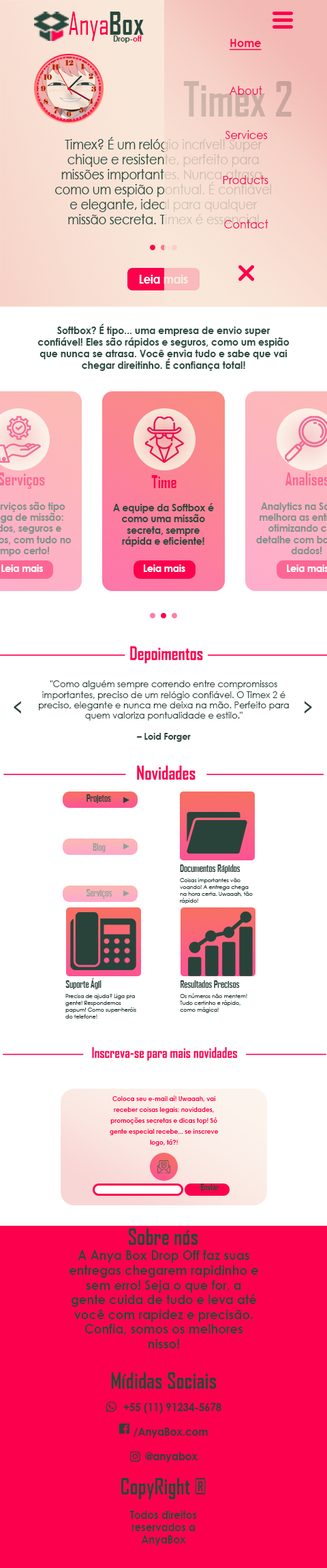
<style>
.page{position:relative;width:327px;height:1568px;background:#ffffff}
.page>*{position:absolute;margin:0}
.t1{font:29.8px "AgencyFB-Reg";color:#fc004d;scale:0.93 1}
.t2{font:29.8px "AgencyFB-Bold";color:#28483d;scale:0.93 1}
.t3{font:7.8px "CenturyGothic-Bold";color:#28483d;scale:0.93 1}
.t4{font:7.8px "CenturyGothic-Bold";color:#fc004d;scale:0.93 1}
.t5{font:11.8px "CenturyGothic-Bold";color:#fc004d;text-decoration:underline;scale:0.93 1}
.t6{font:46.6px "AgencyFB-Bold";color:#ccb1a7;scale:0.89 1}
.t7{font:11.8px "CenturyGothic";color:#fc004d;scale:0.93 1}
.t8{font:13.4px "CenturyGothic";scale:0.89 1}
.t9{font:12.2px "CenturyGothic-Bold";scale:0.89 1}
.t10{font:10.2px "CenturyGothic-Bold";color:#29493d;scale:0.93 1}
.t11{font:17.1px "AgencyFB-Bold";color:#fc004d;scale:0.93 1}
.t12{font:10px "CenturyGothic-Bold";color:#28483d;scale:0.93 1}
.t13{font:10px "CenturyGothic-Bold";color:#ffffff;scale:0.93 1}
.t14{font:9.4px "CenturyGothic";color:#2a433a;scale:0.93 1}
.t15{font:9.4px "CenturyGothic-Bold";color:#2a433a;scale:0.93 1}
.t16{font:9.2px "AgencyFB-Bold";color:#2a433a;scale:0.93 1}
.t17{font:9.2px "AgencyFB-Bold";color:#94a19c;scale:0.93 1}
.t18{font:5.8px/6.8px "CenturyGothic";color:#2a433a;scale:0.93 1}
.t19{font:6.6px/10.9px "CenturyGothic-Bold";color:#fc004d;scale:0.93 1}
.t20{font:9.1px "AgencyFB-Bold";color:#2a433a;scale:0.95 1}
.t21{font:22.1px "AgencyFB-Bold";color:#2a433a;scale:0.93 1}
.t22{font:13.3px "CenturyGothic-Bold";color:#2a433a;scale:0.93 1}
.t23{font:11px "CenturyGothic-Bold";color:#2a433a;scale:0.93 1}
</style>
<div class="page">
<p class="t1" style="left:69px;top:12px;width:75px;height:29px">Anya<span class="t2">Box</span></p>
<p class="t3" style="left:113px;top:35px;width:29px;height:8px">Drop-<span class="t4">off</span></p>
<p class="t5" style="left:230px;top:39px;width:32px;height:11px">Home</p>
<p class="t6" style="left:183px;top:81px;width:109px;height:36px">Timex 2</p>
<p class="t7" style="left:229px;top:86px;width:33px;height:9px">About</p>
<p class="t8" style="left:55px;top:137px;width:216px;height:87px;text-align:center">Timex? É um relógio incrível! Super chique e resistente, perfeito para missões importantes. Nunca atrasa, como um espião pontual. É confiável e elegante, ideal para qualquer missão secreta. Timex é essencial</p>
<p class="t7" style="left:225px;top:130px;width:43px;height:9px">Services</p>
<p class="t7" style="left:223px;top:175px;width:46px;height:9px">Products</p>
<p class="t7" style="left:224px;top:220px;width:45px;height:8px">Contact</p>
<p class="t9" style="left:139px;top:275px;width:49px;height:9px">Leia mais</p>
<p class="t10" style="left:37px;top:324px;width:253px;height:47px;text-align:center">Softbox? É tipo... uma empresa de envio super confiável! Eles são rápidos e seguros, como um espião que nunca se atrasa. Você envia tudo e sabe que vai chegar direitinho. É confiança total!</p>
<p class="t11" style="left:151px;top:475px;width:26px;height:13px">Time</p>
<p class="t12" style="left:113px;top:503px;width:101px;height:44px;text-align:center">A equipe da Softbox é como uma missão secreta, sempre rápida e eficiente!</p>
<p class="t13" style="left:1px;top:564px;width:42px;height:8px">Leia mais</p>
<p class="t13" style="left:144px;top:564px;width:41px;height:8px">Leia mais</p>
<p class="t13" style="left:287px;top:564px;width:42px;height:8px">Leia mais</p>
<p class="t14" style="left:39px;top:680px;width:250px;height:62px;text-align:center">"Como alguém sempre correndo entre compromissos importantes, preciso de um relógio confiável. O Timex 2 é preciso, elegante e nunca me deixa na mão. Perfeito para quem valoriza pontualidade e estilo."  <br><br><span class="t15">– Loid Forger</span></p>
<p class="t16" style="left:87px;top:794px;width:24px;height:9px">Projetos</p>
<p class="t17" style="left:93px;top:843px;width:13px;height:9px">Blog</p>
<p class="t16" style="left:180px;top:864px;width:61px;height:9px">Documentos Rápidos</p>
<p class="t18" style="left:180px;top:878px;width:73px;height:26px">Coisas importantes vão voando! A entrega chega na hora certa. Uwaaah, tão rápido!</p>
<p class="t17" style="left:86px;top:889px;width:26px;height:10px">Serviços</p>
<p class="t16" style="left:65px;top:978px;width:37px;height:11px">Suporte Ágil</p>
<p class="t16" style="left:181px;top:980px;width:59px;height:8px">Resultados Precisos</p>
<p class="t18" style="left:65px;top:994px;width:71px;height:25px">Precisa de ajuda? Liga pra gente! Respondemos papum! Como super-heróis do telefone!</p>
<p class="t18" style="left:180px;top:993px;width:67px;height:20px">Os números não mentem! Tudo certinho e rápido, como mágica!</p>
<p class="t19" style="left:110px;top:1096px;width:109px;height:50px;text-align:center">Coloca seu e-mail aí! Uwaaah, vai receber coisas legais: novidades, promoções secretas e dicas top! Só gente especial recebe... se inscreve logo, tá?!</p>
<p class="t20" style="left:200px;top:1183px;width:20px;height:7px">Enviar</p>
<p class="t21" style="left:128px;top:1228px;width:70px;height:17px">Sobre nós</p>
<p class="t22" style="left:69px;top:1250px;width:189px;height:98px;text-align:center">A Anya Box Drop Off faz suas entregas chegarem rapidinho e sem erro! Seja o que for, a gente cuida de tudo e leva até você com rapidez e precisão. Confia, somos os melhores nisso!</p>
<p class="t21" style="left:111px;top:1372px;width:105px;height:17px">Mídidas Sociais</p>
<p class="t21" style="left:121px;top:1478px;width:85px;height:21px">CopyRight ®</p>
<p class="t23" style="left:130px;top:1511px;width:67px;height:35px;text-align:center">Todos direitos reservados a AnyaBox</p>
</div>
